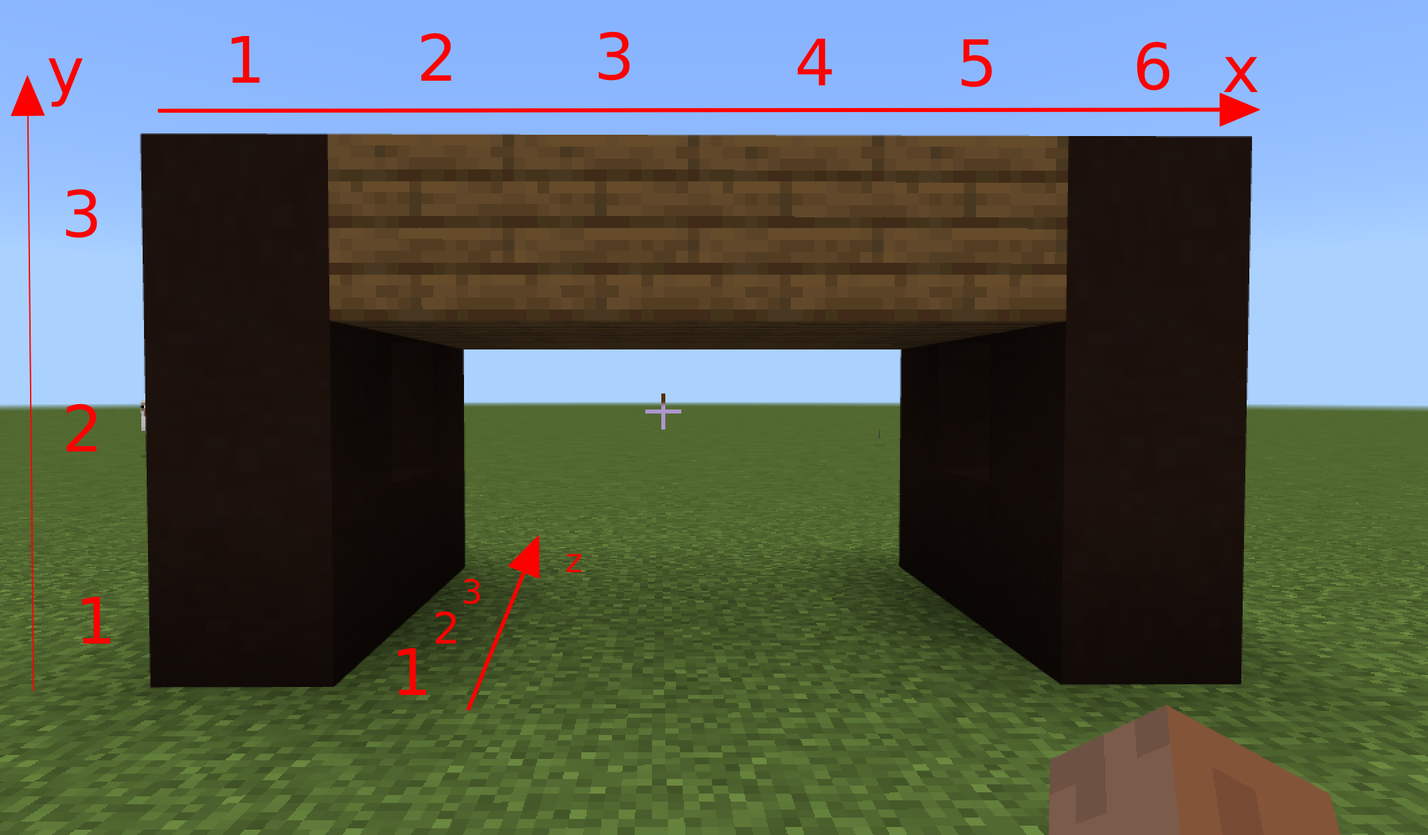
<style>
.page{position:relative;width:1428px;height:835px}
.page>*{position:absolute;margin:0}
.t1{font:64px "DejaVuSans";color:#fc0202}
.t2{font:33.3px "DejaVuSans";color:#fc0202}
.t3{font:43.3px "DejaVuSans";color:#fc0202}
</style>
<div class="page">
<p class="t1" style="left:231px;top:36px;width:29px;height:47px">1</p>
<p class="t1" style="left:421px;top:33px;width:30px;height:48px">2</p>
<p class="t1" style="left:599px;top:31px;width:31px;height:50px">3</p>
<p class="t1" style="left:798px;top:39px;width:34px;height:46px">4</p>
<p class="t1" style="left:962px;top:39px;width:30px;height:48px">5</p>
<p class="t1" style="left:1137px;top:41px;width:33px;height:50px">6</p>
<p class="t1" style="left:48px;top:58px;width:35px;height:49px">y</p>
<p class="t1" style="left:1224px;top:57px;width:34px;height:35px">x</p>
<p class="t1" style="left:66px;top:189px;width:31px;height:49px">3</p>
<p class="t1" style="left:67px;top:403px;width:30px;height:48px">2</p>
<p class="t2" style="left:567px;top:553px;width:15px;height:19px">z</p>
<p class="t2" style="left:463px;top:578px;width:17px;height:26px">3</p>
<p class="t1" style="left:82px;top:597px;width:29px;height:46px">1</p>
<p class="t3" style="left:435px;top:611px;width:21px;height:32px">2</p>
<p class="t1" style="left:398px;top:648px;width:29px;height:47px">1</p>
</div>
